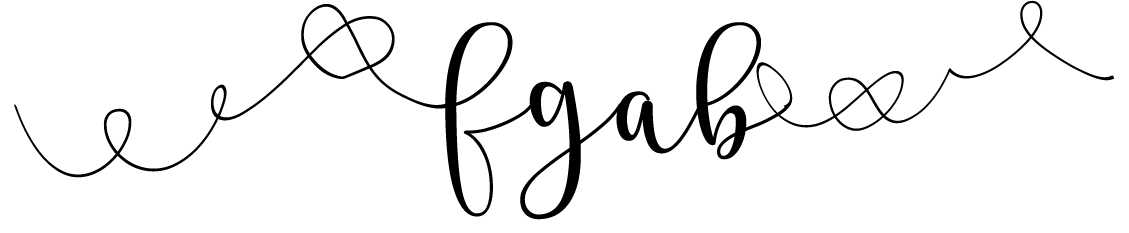
<style>
.page{position:relative;width:1129px;height:233px;background:#ffffff}
.page>*{position:absolute;margin:0}
.t1{font:125px "Stea";color:#000000}
.t2{font:100px "Stea";color:#000000}
.t3{font:150px "Stea";color:#000000}
</style>
<div class="page">
<p class="t1" style="left:14px;top:4px;width:440px;height:174px">~&amp;</p>
<p class="t2" style="left:756px;top:0px;width:358px;height:131px">(~</p>
<p class="t3" style="left:445px;top:22px;width:346px;height:198px">fgab</p>
</div>
